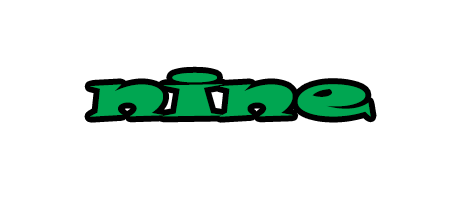
<style>
.page{position:relative;width:462px;height:199px;background:#ffffff}
.page>*{position:absolute;margin:0}
.t1{font:60px "SnapITC-Regular";color:#00a651;scale:2 1}
</style>
<div class="page">
<p class="t1" style="left:90px;top:72px;width:281px;height:45px">nine</p>
</div>
